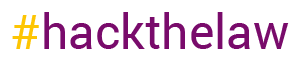
<style>
.page{position:relative;width:300px;height:57px;background:#ffffff}
.page>*{position:absolute;margin:0}
.t1{font:48px "Roboto-Regular";color:#790b6b}
.t2{font:48px "Roboto-Regular";color:#fec503}
</style>
<div class="page">
<p class="t1" style="left:12px;top:12px;width:277px;height:37px"><span class="t2">#</span>hackthelaw</p>
</div>
